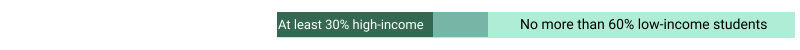
<style>
.page{position:relative;width:800px;height:50px;background:#ffffff}
.page>*{position:absolute;margin:0}
.t1{font:13px "Roboto-Regular";color:#ffffff}
.t2{font:14px "Roboto-Regular";color:#000000}
</style>
<div class="page">
<p class="t1" style="left:278px;top:19px;width:146px;height:13px">At least 30% high-income</p>
<p class="t2" style="left:521px;top:18px;width:246px;height:12px">No more than 60% low-income students</p>
</div>
